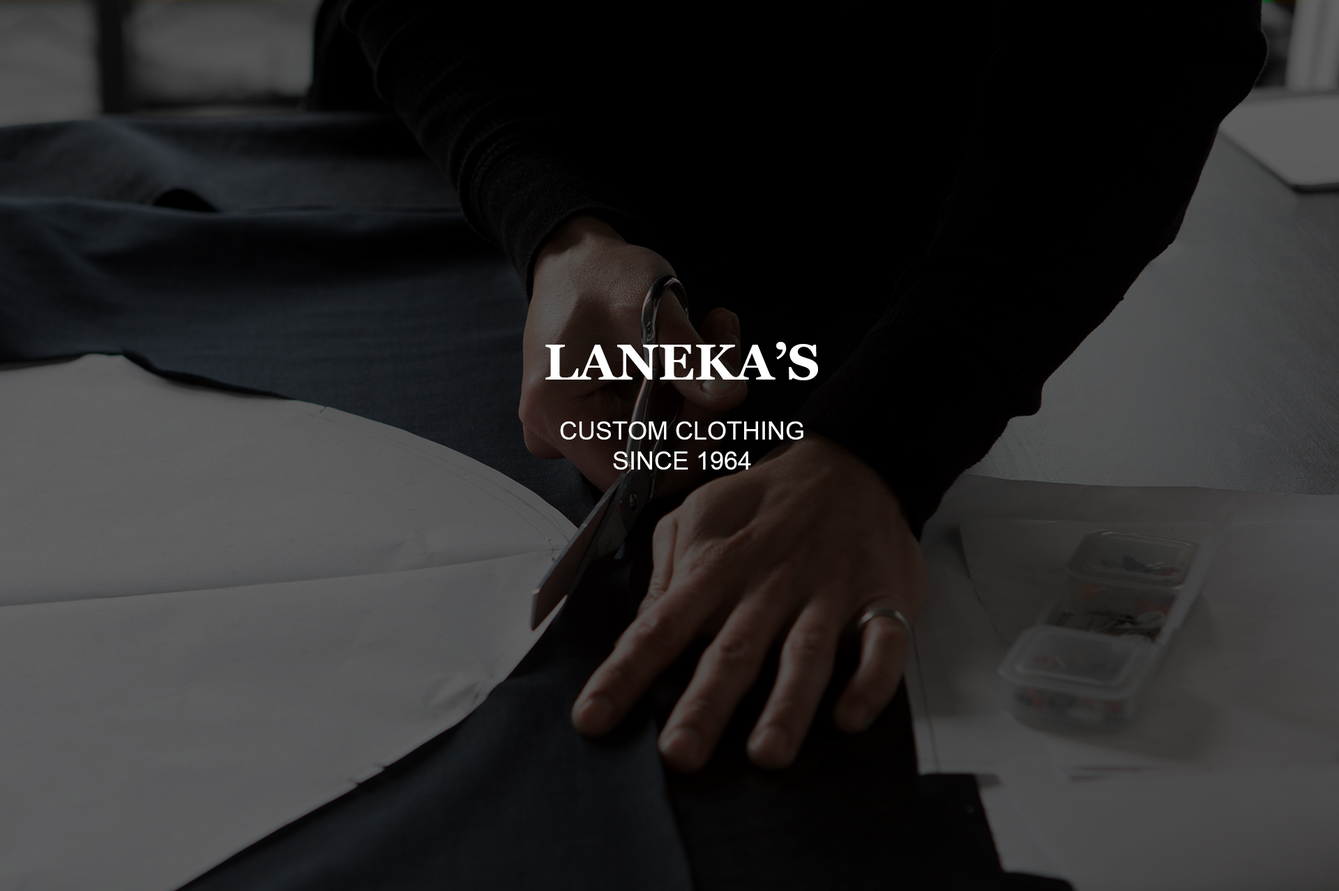
<style>
.page{position:relative;width:1339px;height:891px}
.page>*{position:absolute;margin:0}
.t1{font:50.2px "Georgia-Bold";color:#ffffff}
.t2{font:25.1px "ArialMT";color:#ffffff}
</style>
<div class="page">
<p class="t1" style="left:545px;top:342px;width:273px;height:38px">LANEKA’S</p>
<p class="t2" style="left:560px;top:421px;width:243px;height:48px;text-align:center">CUSTOM CLOTHING<br>SINCE 1964</p>
</div>
